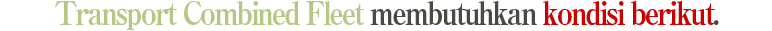
<style>
.page{position:relative;width:772px;height:31px;background:#ffffff}
.page>*{position:absolute;margin:0}
.t1{font:32px "RyuminPro-ExBold";letter-spacing:-0.08em;color:#b5c784;scale:0.9 1}
.t2{font:32px "RyuminPro-ExBold";letter-spacing:-0.08em;color:#4c4842;scale:0.9 1}
.t3{font:32px "RyuminPro-ExBold";letter-spacing:-0.08em;color:#cb0000;scale:0.9 1}
</style>
<div class="page">
<p class="t1" style="left:55px;top:1px;width:664px;height:29px">Transport Combined Fleet<span class="t2"> membutuhkan </span><span class="t3">kondisi berikut</span><span class="t2">.</span></p>
</div>
